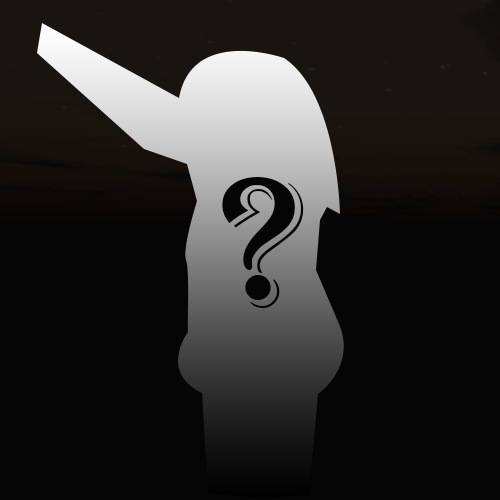
<style>
.page{position:relative;width:500px;height:500px;background:#050505}
.page>*{position:absolute;margin:0}
.t1{font:200px "Algerian";color:#050505}
</style>
<div class="page">
<p class="t1" style="left:222px;top:177px;width:82px;height:131px">?</p>
</div>
